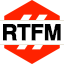
<style>
.page{position:relative;width:64px;height:64px;background:#ffffff}
.page>*{position:absolute;margin:0}
.t1{font:22px "Helvetica-Bold";letter-spacing:-0.04em;color:#000000;font-weight:bold}
</style>
<div class="page">
<p class="t1" style="left:3px;top:24px;width:58px;height:17px">RTFM</p>
</div>
